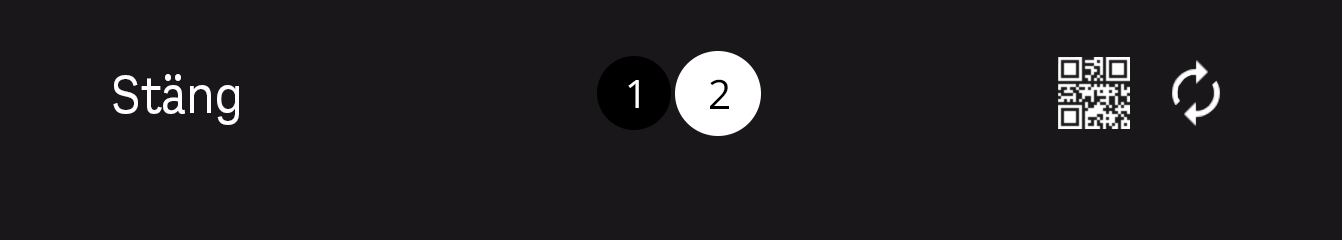
<style>
.page{position:relative;width:1342px;height:240px;background:#191719}
.page>*{position:absolute;margin:0}
.t1{font:54.8px "Aestetico-Regular";color:#ffffff;scale:0.91 1}
.t2{font:39.1px "OpenSans-Regular";color:#ffffff}
.t3{font:40.5px "OpenSans-Regular";color:#000000}
</style>
<div class="page">
<p class="t1" style="left:113px;top:74px;width:126px;height:51px">Stäng</p>
<p class="t2" style="left:628px;top:80px;width:11px;height:28px">1</p>
<p class="t3" style="left:710px;top:79px;width:19px;height:30px">2</p>
</div>
